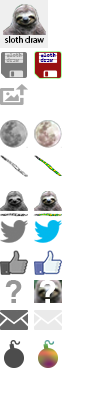
<style>
.page{position:relative;width:100px;height:400px;background:#ffffff}
.page>*{position:absolute;margin:0}
.t1{font:9px "MyriadPro-Regular";color:#000000}
.t2{font:5px/5px "Courier-Bold";color:#9d9d9d}
.t3{font:5px/5px "Courier-Bold";color:#17008d}
.t4{font:30.6px "Helvetica-Bold";color:#979797}
.t5{font:30.6px "Helvetica-Bold";color:#ffffff}
</style>
<div class="page">
<p class="t1" style="left:5px;top:36px;width:39px;height:7px">sloth draw</p>
<p class="t2" style="left:6px;top:53px;width:16px;height:9px">sloth<br>draw</p>
<p class="t3" style="left:40px;top:53px;width:16px;height:9px">sloth<br>draw</p>
<p class="t4" style="left:5px;top:280px;width:17px;height:23px">?</p>
<p class="t5" style="left:39px;top:280px;width:17px;height:23px">?</p>
</div>
